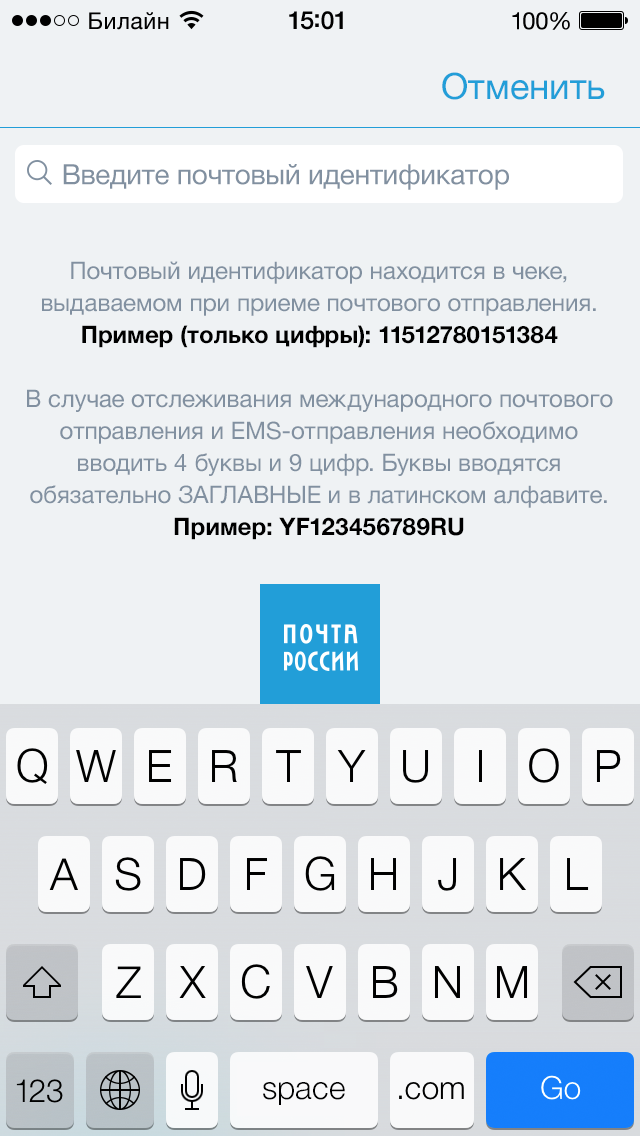
<style>
.page{position:relative;width:640px;height:1136px;background:#eff2f4}
.page>*{position:absolute;margin:0}
.t1{font:36px "HelveticaNeue";color:#229ed8}
.t2{font:28px "HelveticaNeue";letter-spacing:-0.01em;color:#8190a0}
.t3{font:24px/32px "HelveticaNeue";color:#8190a0}
.t4{font:24px/32px "HelveticaNeue-Bold";color:#000000}
</style>
<div class="page">
<p class="t1" style="left:442px;top:72px;width:163px;height:28px">Отменить</p>
<p class="t2" style="left:63px;top:164px;width:446px;height:26px">Введите почтовый идентификатор</p>
<p class="t3" style="left:27px;top:261px;width:586px;height:279px;text-align:center">Почтовый идентификатор находится в чеке, выдаваемом при приеме почтового отправления. <br><span class="t4">Пример (только цифры): 11512780151384</span> <br> <br>В случае отслеживания международного почтового отправления и EMS-отправления необходимо вводить 4 буквы и 9 цифр. Буквы вводятся обязательно ЗАГЛАВНЫЕ и в латинском алфавите.<br><span class="t4">Пример: YF123456789RU</span></p>
</div>
